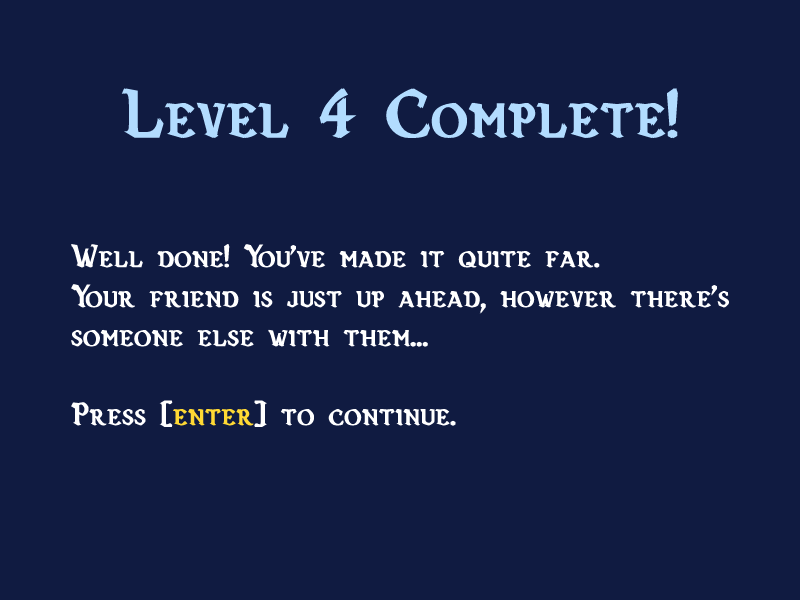
<style>
.page{position:relative;width:800px;height:600px;background:#101b41}
.page>*{position:absolute;margin:0}
.t1{font:70px "Vecna-Bold";color:#b2dcff;font-weight:bold}
.t2{font:33px "Vecna-Bold";color:#ffffff;font-weight:bold}
.t3{font:33px "Vecna-Bold";color:#ffd934;font-weight:bold}
</style>
<div class="page">
<p class="t1" style="left:121px;top:87px;width:557px;height:52px">Level 4 Complete!</p>
<p class="t2" style="left:70px;top:243px;width:660px;height:184px">Well done! You've made it quite far.<br>Your friend is just up ahead, however there's<br>someone else with them...<br><br>Press [<span class="t3">enter</span>] to continue.</p>
</div>
